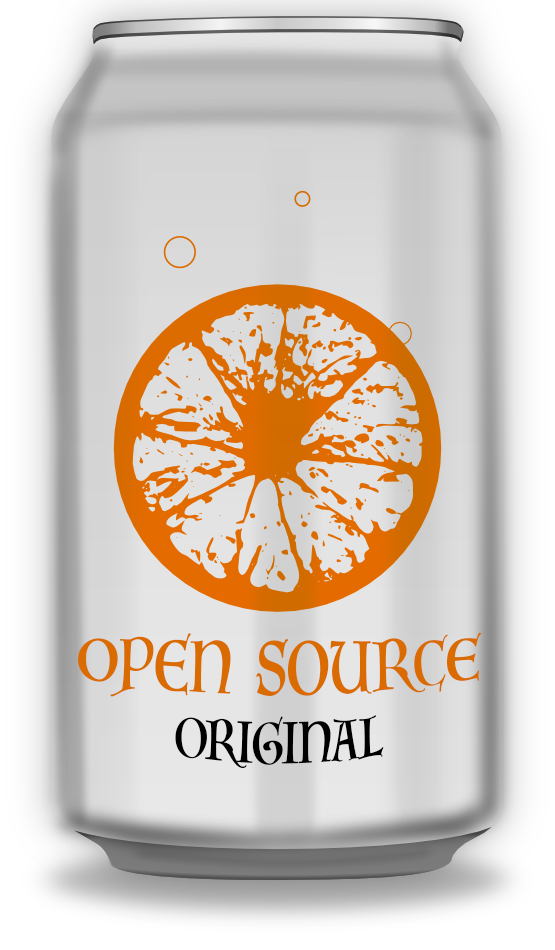
<style>
.page{position:relative;width:555px;height:950px}
.page>*{position:absolute;margin:0}
.t1{font:52.4px "Luminari-Regular";color:#d96b00}
.t2{font:40.3px "Luminari-Regular";color:#000000}
</style>
<div class="page">
<p class="t1" style="left:78px;top:632px;width:404px;height:136px;text-align:center">OPEN  SOURCE<br><span class="t2">ORIGINAL</span></p>
</div>
